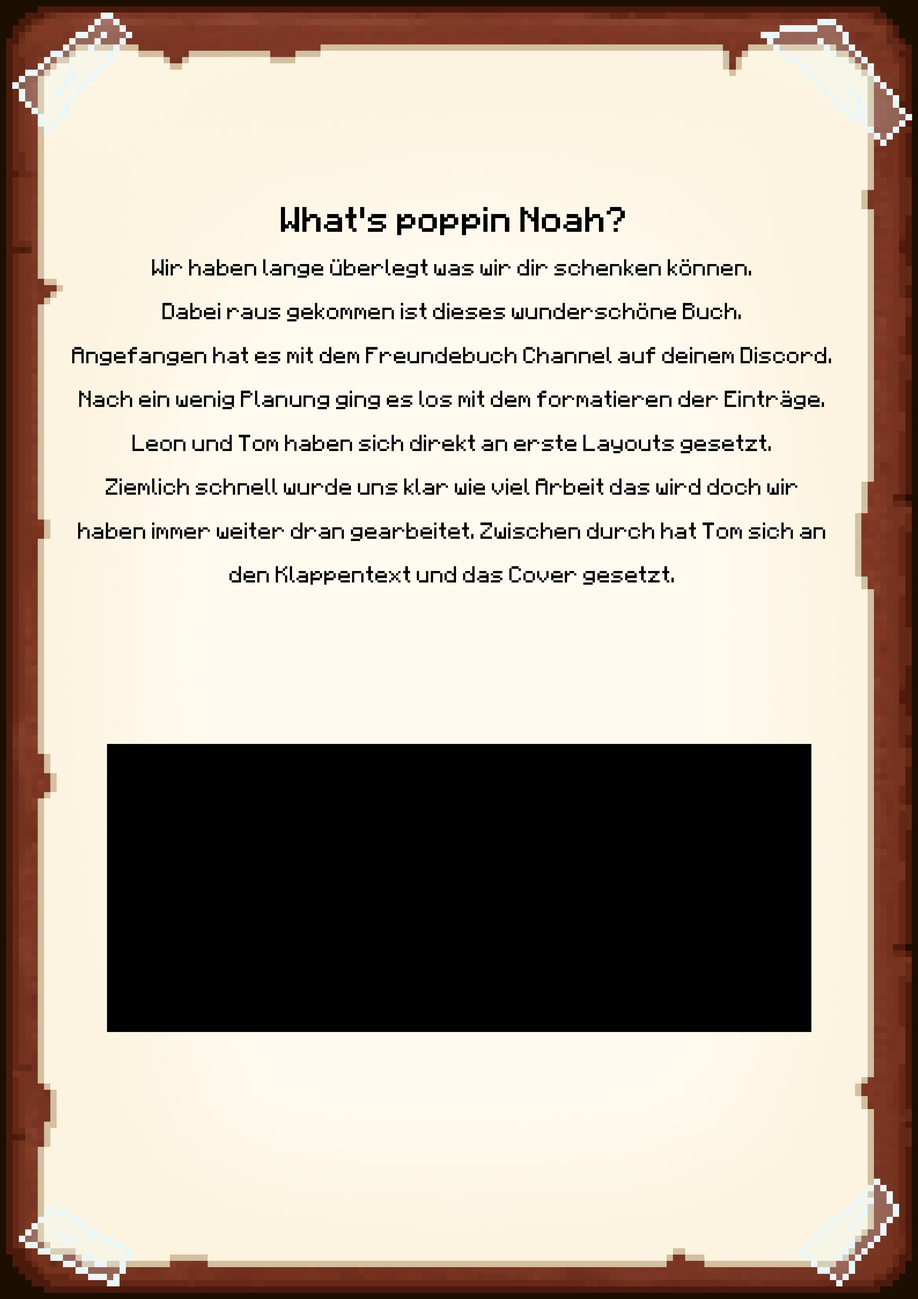
<style>
.page{position:relative;width:918px;height:1299px}
.page>*{position:absolute;margin:0}
.t1{font:18.5px/43.9px "Minecraft";color:#000000}
.t2{font:27.8px/43.9px "Minecraft";color:#000000;font-weight:bold}
</style>
<div class="page">
<p class="t1" style="left:72px;top:207px;width:759px;height:378px;text-align:center"><span class="t2"><br><br><br>What's poppin Noah?<br></span>Wir haben lange überlegt was wir dir schenken können. <br>Dabei raus gekommen ist dieses wunderschöne Buch.<br>Angefangen hat es mit dem Freundebuch Channel auf deinem Discord.<br>Nach ein wenig Planung ging es los mit dem formatieren der Einträge.<br>Leon und Tom haben sich direkt an erste Layouts gesetzt.<br>Ziemlich schnell wurde uns klar wie viel Arbeit das wird doch wir haben immer weiter dran gearbeitet. Zwischen durch hat Tom sich an den Klappentext und das Cover gesetzt.</p>
</div>
